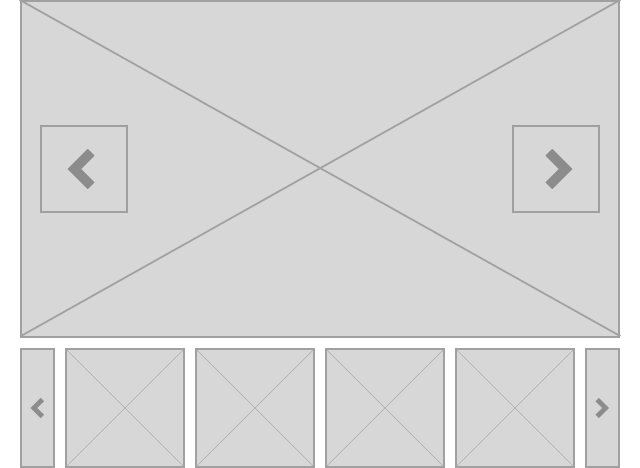
<style>
.page{position:relative;width:640px;height:468px;background:#d7d7d7}
.page>*{position:absolute;margin:0}
.t1{font:40px "SSStandard";color:#8c8c8c;text-transform:uppercase}
.t2{font:20px "SSStandard";color:#8c8c8c;text-transform:uppercase}
</style>
<div class="page">
<p class="t1" style="left:67px;top:149px;width:28px;height:40px">navigateleft</p>
<p class="t1" style="left:545px;top:149px;width:28px;height:40px">navigateright</p>
<p class="t2" style="left:30px;top:398px;width:14px;height:20px">navigateleft</p>
<p class="t2" style="left:595px;top:398px;width:14px;height:20px">NAVIGATERIGHT</p>
</div>
